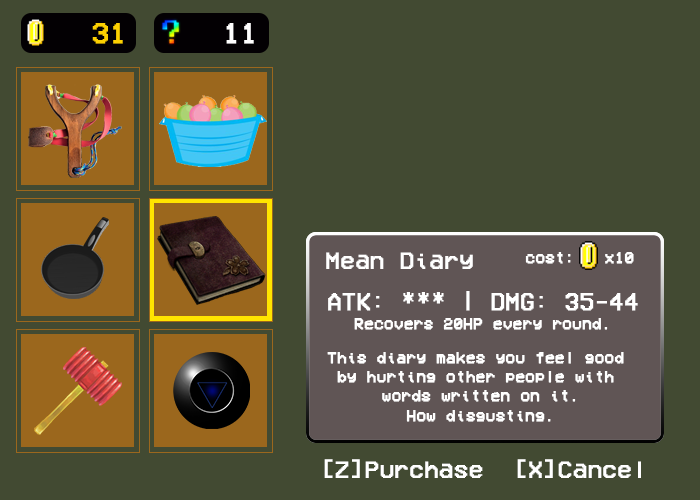
<style>
.page{position:relative;width:700px;height:500px;background:#424a32}
.page>*{position:absolute;margin:0}
.t1{font:28.6px "VCROSDMono";color:#fcd001;font-weight:bold}
.t2{font:28.6px "VCROSDMono";color:#fefefe;font-weight:bold}
.t3{font:24px "VCROSDMono";color:#ffffff;font-weight:bold}
.t4{font:16px "VCROSDMono";color:#ffffff;font-weight:bold}
</style>
<div class="page">
<p class="t1" style="left:92px;top:23px;width:31px;height:21px">31</p>
<p class="t2" style="left:226px;top:23px;width:28px;height:21px">11</p>
<p class="t3" style="left:326px;top:252px;width:147px;height:17px">Mean Diary</p>
<p class="t4" style="left:525px;top:252px;width:109px;height:12px">cost:   x10</p>
<p class="t4" style="left:328px;top:291px;width:310px;height:39px;text-align:center"><span class="t3">ATK: *** | DMG: 35-44<br></span>Recovers 20HP every round.</p>
<p class="t4" style="left:327px;top:352px;width:297px;height:70px;text-align:center">This diary makes you feel good <br>by hurting other people with <br>words written on it.<br>How disgusting.</p>
<p class="t3" style="left:324px;top:459px;width:317px;height:19px">[Z]Purchase  [X]Cancel</p>
</div>
